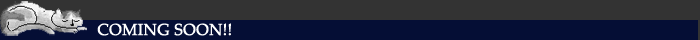
<style>
.page{position:relative;width:700px;height:40px;background:#333333}
.page>*{position:absolute;margin:0}
.t1{font:16px "PalatinoLinotype-Roman";color:#ffffff;text-transform:uppercase;font-weight:bold}
</style>
<div class="page">
<p class="t1" style="left:97px;top:23px;width:134px;height:13px">coming soon!!</p>
</div>
